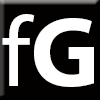
<style>
.page{position:relative;width:100px;height:100px;background:#030000}
.page>*{position:absolute;margin:0}
.t1{font:100px "MyriadPro-Regular";color:#ffffff}
.t2{font:100px "MyriadPro-Bold";color:#ffffff}
</style>
<div class="page">
<p class="t1" style="left:2px;top:14px;width:92px;height:73px">f<span class="t2">G</span></p>
</div>
